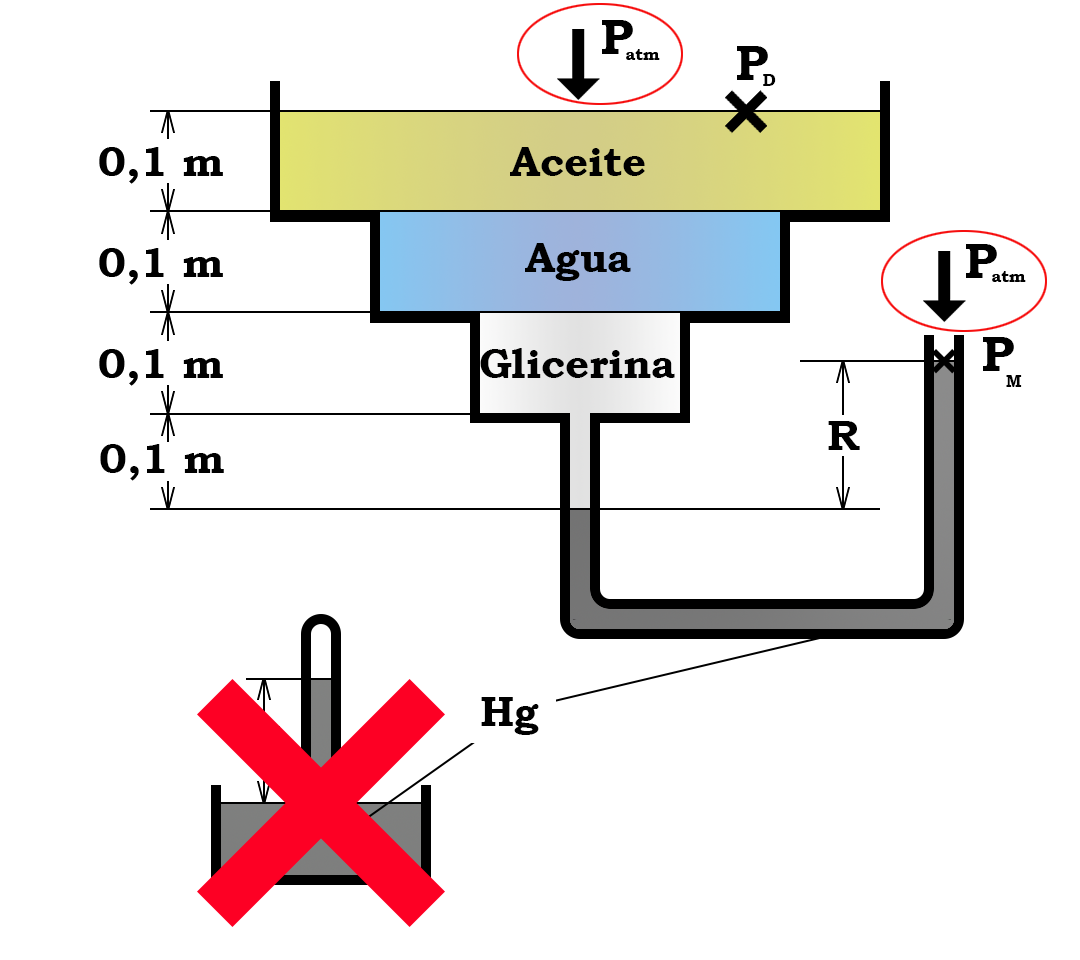
<style>
.page{position:relative;width:1080px;height:960px;background:#ffffff}
.page>*{position:absolute;margin:0}
.t1{font:50px "BookmanOldStyle-Bold";color:#000000}
.t2{font:16.7px "BookmanOldStyle-Bold";color:#000000}
.t3{font:41.7px "BookmanOldStyle-Bold";color:#000000}
</style>
<div class="page">
<p class="t1" style="left:602px;top:20px;width:31px;height:34px">P</p>
<p class="t1" style="left:737px;top:46px;width:31px;height:34px">P</p>
<p class="t2" style="left:763px;top:74px;width:13px;height:12px">D</p>
<p class="t3" style="left:510px;top:147px;width:135px;height:29px">Aceite</p>
<p class="t3" style="left:525px;top:243px;width:106px;height:38px">Agua</p>
<p class="t1" style="left:966px;top:244px;width:31px;height:34px">P</p>
<p class="t1" style="left:983px;top:337px;width:31px;height:34px">P</p>
<p class="t3" style="left:480px;top:348px;width:195px;height:30px">Glicerina</p>
<p class="t2" style="left:1006px;top:375px;width:16px;height:12px">M</p>
<p class="t3" style="left:828px;top:421px;width:32px;height:29px">R</p>
<p class="t3" style="left:100px;top:444px;width:124px;height:37px">0,1 m</p>
<p class="t3" style="left:481px;top:697px;width:58px;height:38px">Hg</p>
</div>
